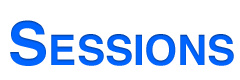
<style>
.page{position:relative;width:240px;height:80px;background:#ffffff}
.page>*{position:absolute;margin:0}
.t1{font:60px "Helvetica-Bold";color:#0064ff;font-variant:small-caps}
</style>
<div class="page">
<p class="t1" style="left:10px;top:20px;width:224px;height:46px">Sessions</p>
</div>
